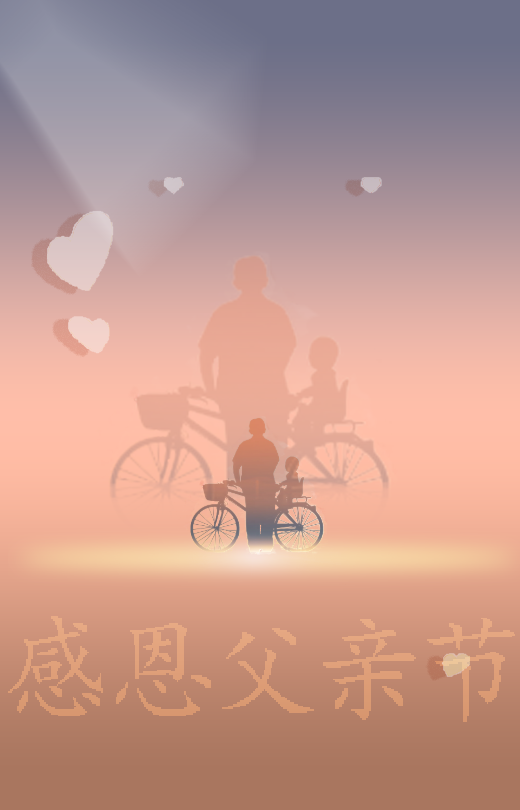
<style>
.page{position:relative;width:520px;height:810px}
.page>*{position:absolute;margin:0}
.t1{font:115px "¿¬Ìå";letter-spacing:-0.1em;color:#dfa07a}
</style>
<div class="page">
<p class="t1" style="left:8px;top:616px;width:507px;height:106px">感恩父亲节</p>
</div>
